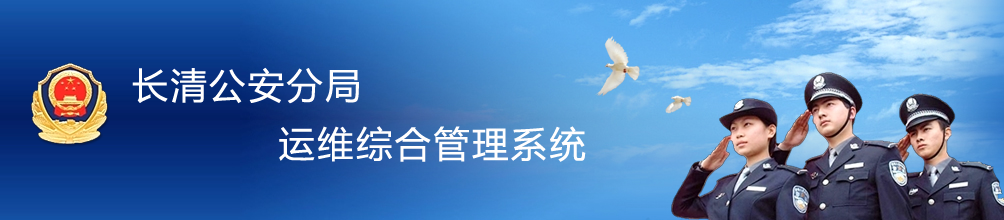
<style>
.page{position:relative;width:1004px;height:220px}
.page>*{position:absolute;margin:0}
.t1{font:36px "MicrosoftYaHei";letter-spacing:0.075em;color:#fffefe}
</style>
<div class="page">
<p class="t1" style="left:132px;top:67px;width:227px;height:37px">长清公安分局</p>
<p class="t1" style="left:279px;top:126px;width:307px;height:36px">运维综合管理系统</p>
</div>
